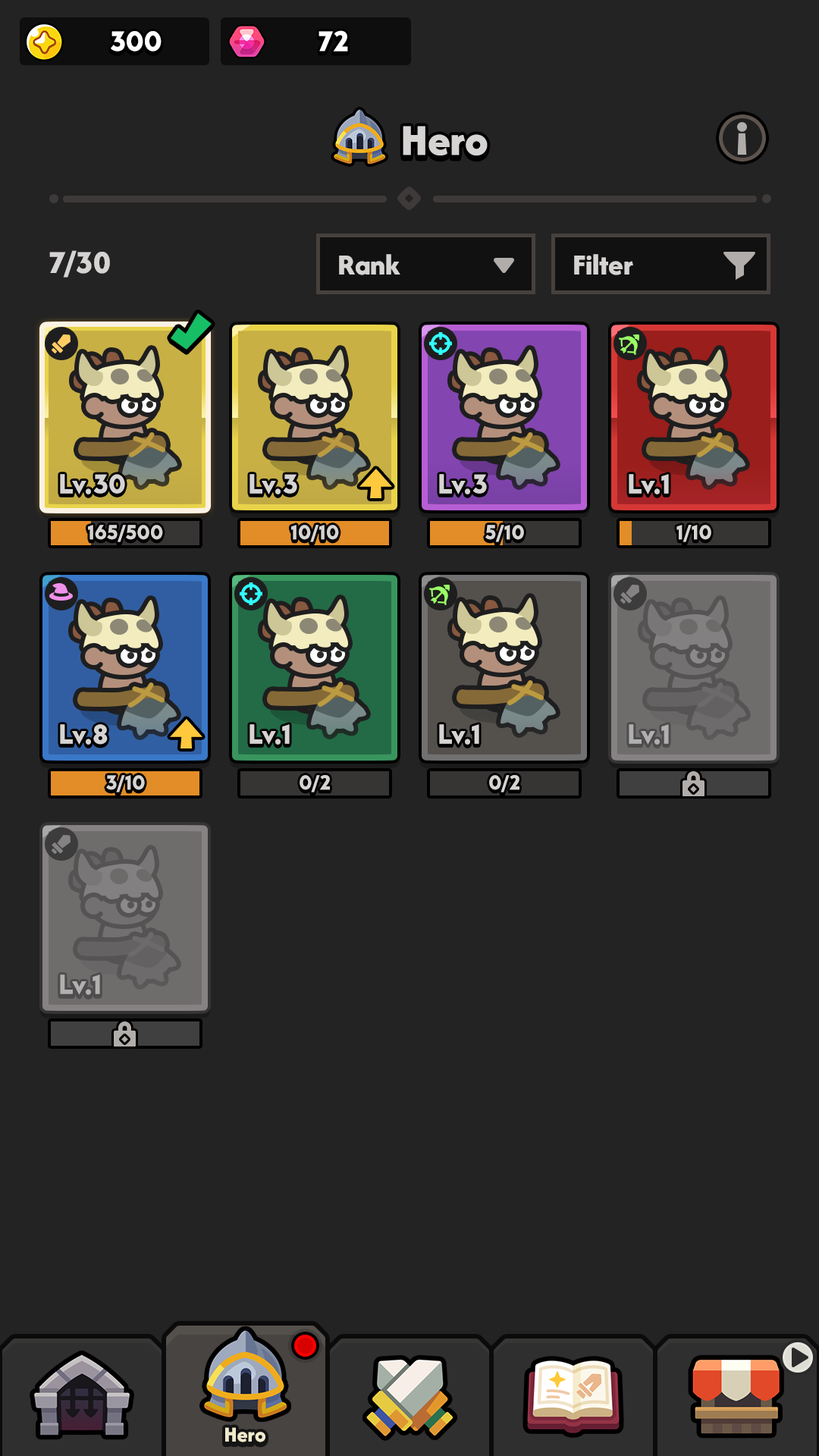
<style>
.page{position:relative;width:819px;height:1456px;background:#232323}
.page>*{position:absolute;margin:0}
.t1{font:29.6px "LTAvocado-Bold";color:#ffffff}
.t2{font:45.5px "AfacadFlux-ExtraBold";color:#d6d4d3}
.t3{font:33.4px "AfacadFlux-ExtraBold";color:#d6d4d3}
.t4{font:30.3px "AfacadFlux-ExtraBold";color:#d6d4d3}
.t5{font:28.4px "LTAvocado-Bold";color:#d6d4d3}
.t6{font:21.2px "LTAvocado-Bold";color:#d6d4d3}
.t7{font:28.4px "LTAvocado-Bold";color:#b1b0b0}
.t8{font:22px "AfacadFlux-ExtraBold";color:#f1ebcc}
</style>
<div class="page">
<p class="t1" style="left:111px;top:31px;width:51px;height:21px">300</p>
<p class="t1" style="left:318px;top:30px;width:30px;height:22px">72</p>
<p class="t2" style="left:403px;top:126px;width:85px;height:29px">Hero</p>
<p class="t3" style="left:49px;top:250px;width:61px;height:28px">7/30</p>
<p class="t4" style="left:339px;top:254px;width:61px;height:21px">Rank</p>
<p class="t4" style="left:574px;top:254px;width:59px;height:21px">Filter</p>
<p class="t5" style="left:60px;top:474px;width:65px;height:20px">Lv.30</p>
<p class="t5" style="left:249px;top:474px;width:48px;height:20px">Lv.3</p>
<p class="t5" style="left:439px;top:474px;width:48px;height:20px">Lv.3</p>
<p class="t5" style="left:629px;top:474px;width:40px;height:20px">Lv.1</p>
<p class="t6" style="left:88px;top:525px;width:75px;height:17px">165/500</p>
<p class="t6" style="left:291px;top:525px;width:48px;height:17px">10/10</p>
<p class="t6" style="left:485px;top:525px;width:39px;height:17px">5/10</p>
<p class="t6" style="left:676px;top:525px;width:35px;height:17px">1/10</p>
<p class="t5" style="left:60px;top:724px;width:48px;height:21px">Lv.8</p>
<p class="t5" style="left:249px;top:724px;width:41px;height:21px">Lv.1</p>
<p class="t5" style="left:439px;top:724px;width:40px;height:21px">Lv.1</p>
<p class="t7" style="left:629px;top:724px;width:40px;height:21px">Lv.1</p>
<p class="t6" style="left:106px;top:775px;width:39px;height:17px">3/10</p>
<p class="t6" style="left:300px;top:775px;width:30px;height:17px">0/2</p>
<p class="t6" style="left:489px;top:775px;width:30px;height:17px">0/2</p>
<p class="t7" style="left:60px;top:974px;width:40px;height:21px">Lv.1</p>
<p class="t8" style="left:225px;top:1427px;width:40px;height:15px">Hero</p>
</div>
